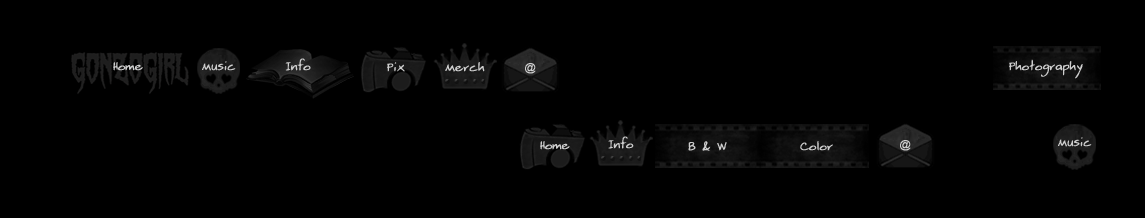
<style>
.page{position:relative;width:1145px;height:218px;background:#000000}
.page>*{position:absolute;margin:0}
.t1{font:13.4px "Beatty";color:#cecece;font-weight:bold}
.t2{font:13.4px "Beatty";color:#cecece;font-weight:bold;scale:0.93 1}
.t3{font:11px "ArialMT";color:#cecece;font-weight:bold}
</style>
<div class="page">
<p class="t1" style="left:113px;top:62px;width:30px;height:9px">Home</p>
<p class="t2" style="left:202px;top:61px;width:34px;height:10px">Music</p>
<p class="t1" style="left:285px;top:58px;width:26px;height:13px">Info</p>
<p class="t1" style="left:387px;top:62px;width:18px;height:10px">Pix</p>
<p class="t1" style="left:445px;top:62px;width:40px;height:10px">Merch</p>
<p class="t3" style="left:525px;top:63px;width:11px;height:11px">@</p>
<p class="t1" style="left:1009px;top:59px;width:74px;height:20px">Photography</p>
<p class="t1" style="left:608px;top:136px;width:26px;height:13px">Info</p>
<p class="t2" style="left:1058px;top:137px;width:34px;height:10px">Music</p>
<p class="t1" style="left:540px;top:141px;width:30px;height:9px">Home</p>
<p class="t1" style="left:688px;top:141px;width:39px;height:10px">B &amp; W</p>
<p class="t1" style="left:800px;top:141px;width:33px;height:10px">Color</p>
<p class="t3" style="left:900px;top:140px;width:11px;height:11px">@</p>
</div>
